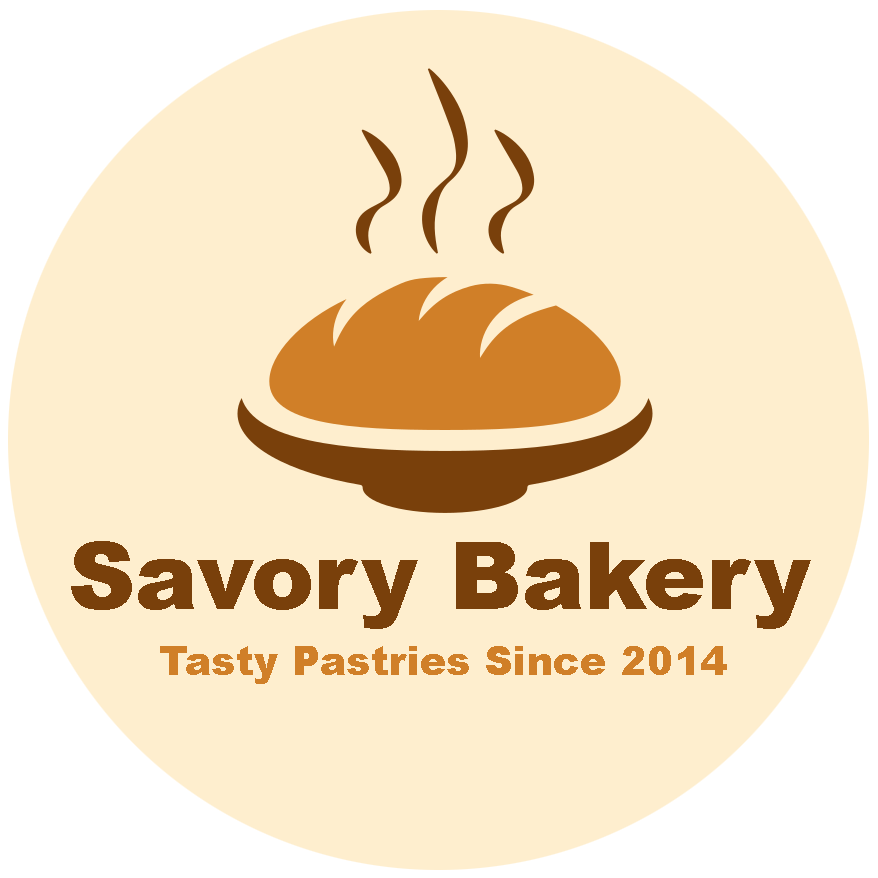
<style>
.page{position:relative;width:878px;height:878px;background:#feeece}
.page>*{position:absolute;margin:0}
.t1{font:93.6px "Arial-Black";color:#79400b}
.t2{font:40px "Arial-Black";color:#d07f28}
</style>
<div class="page">
<p class="t1" style="left:71px;top:541px;width:740px;height:88px">Savory Bakery</p>
<p class="t2" style="left:160px;top:646px;width:567px;height:38px">Tasty Pastries Since 2014</p>
</div>
